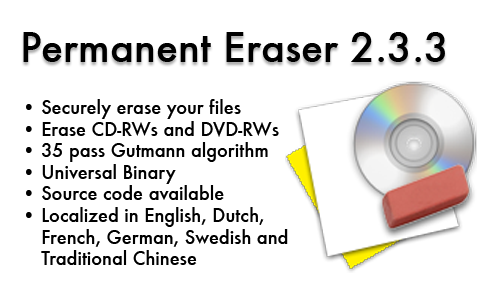
<style>
.page{position:relative;width:500px;height:300px;background:#ffffff}
.page>*{position:absolute;margin:0}
.t1{font:40px "Futura-Medium";color:#000000}
.t2{font:18px "Futura-Medium";color:#000000}
</style>
<div class="page">
<p class="t1" style="left:23px;top:32px;width:422px;height:30px">Permanent Eraser 2.3.3</p>
<p class="t2" style="left:26px;top:99px;width:262px;height:166px">• Securely erase your files<br>• Erase CD-RWs and DVD-RWs<br>• 35 pass Gutmann algorithm<br>• Universal Binary<br>• Source code available<br>• Localized in English, Dutch,<br>    French, German, Swedish and<br>    Traditional Chinese</p>
</div>
